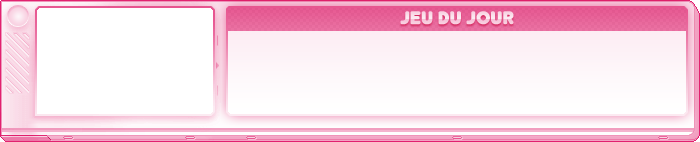
<style>
.page{position:relative;width:700px;height:142px}
.page>*{position:absolute;margin:0}
.t1{font:18px "Junegull-Regular";color:#f9d3e2;font-weight:bold}
</style>
<div class="page">
<p class="t1" style="left:400px;top:11px;width:114px;height:14px">Jeu du jour</p>
</div>
